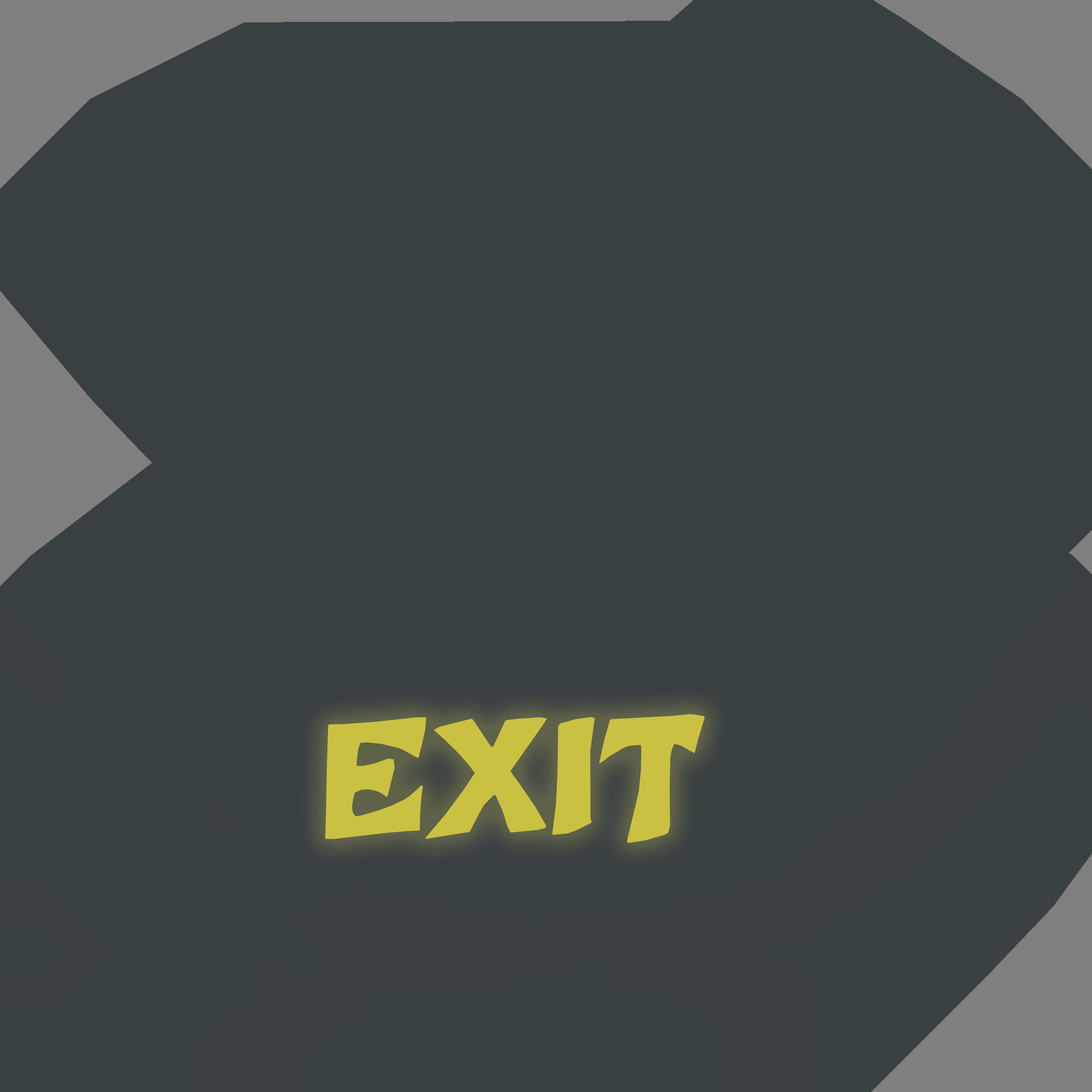
<style>
.page{position:relative;width:1092px;height:1092px;background:#394042}
.page>*{position:absolute;margin:0}
.t1{font:160px "Tarzan";color:#cac142}
</style>
<div class="page">
<p class="t1" style="left:325px;top:714px;width:380px;height:129px">EXIT</p>
</div>
